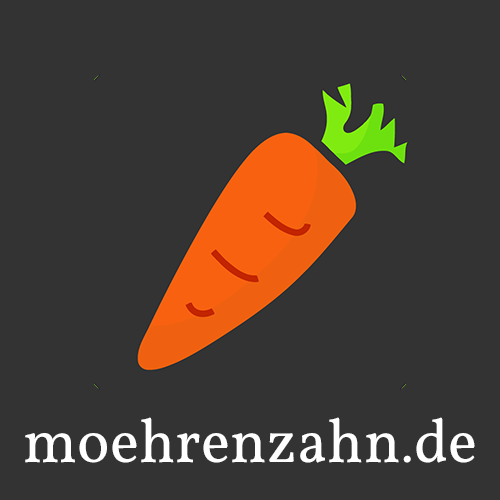
<style>
.page{position:relative;width:500px;height:500px;background:#333333}
.page>*{position:absolute;margin:0}
.t1{font:62.1px "Vollkorn-Regular";color:#ffffff}
</style>
<div class="page">
<p class="t1" style="left:25px;top:417px;width:450px;height:46px">moehrenzahn.de</p>
</div>
